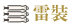
<style>
.page{position:relative;width:69px;height:27px;background:#ffffff}
.page>*{position:absolute;margin:0}
.t1{font:18px "RyuminPro-Heavy";color:#ae9442}
</style>
<div class="page">
<p class="t1" style="left:33px;top:4px;width:35px;height:18px">雷裝</p>
</div>
